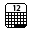
<style>
.page{position:relative;width:32px;height:32px;background:#ffffff}
.page>*{position:absolute;margin:0}
.t1{font:8.3px "MyriadPro-Regular";color:#030303}
</style>
<div class="page">
<p class="t1" style="left:13px;top:5px;width:8px;height:6px">12</p>
</div>
